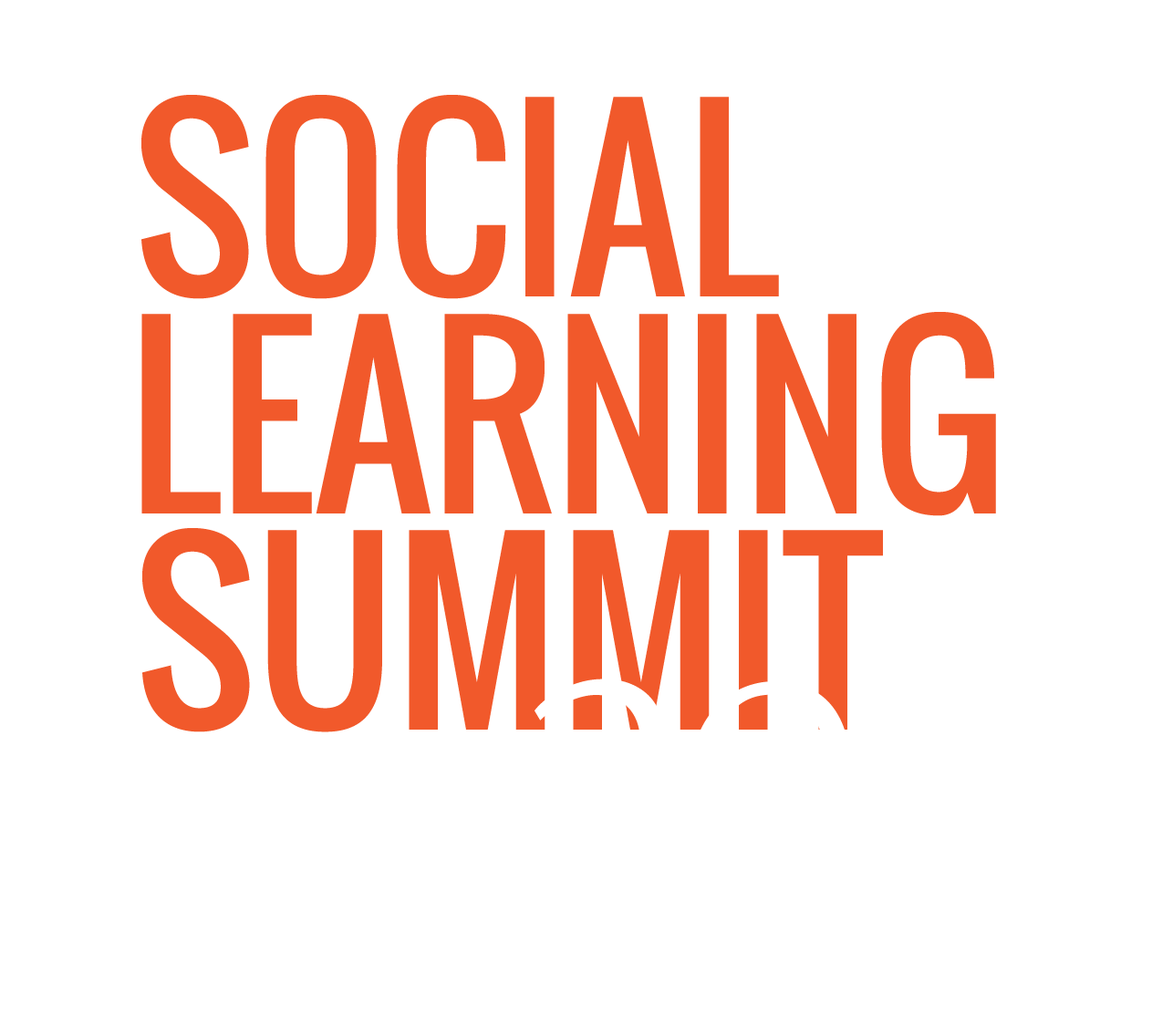
<style>
.page{position:relative;width:1173px;height:1016px;background:#ffffff}
.page>*{position:absolute;margin:0}
.t1{font:228.1px "Oswald";color:#f1592b}
</style>
<div class="page">
<p class="t1" style="left:141px;top:95px;width:638px;height:204px">SOCIAL</p>
<p class="t1" style="left:141px;top:312px;width:855px;height:204px">LEARNING</p>
<p class="t1" style="left:142px;top:528px;width:741px;height:205px">SUMMIT</p>
</div>
